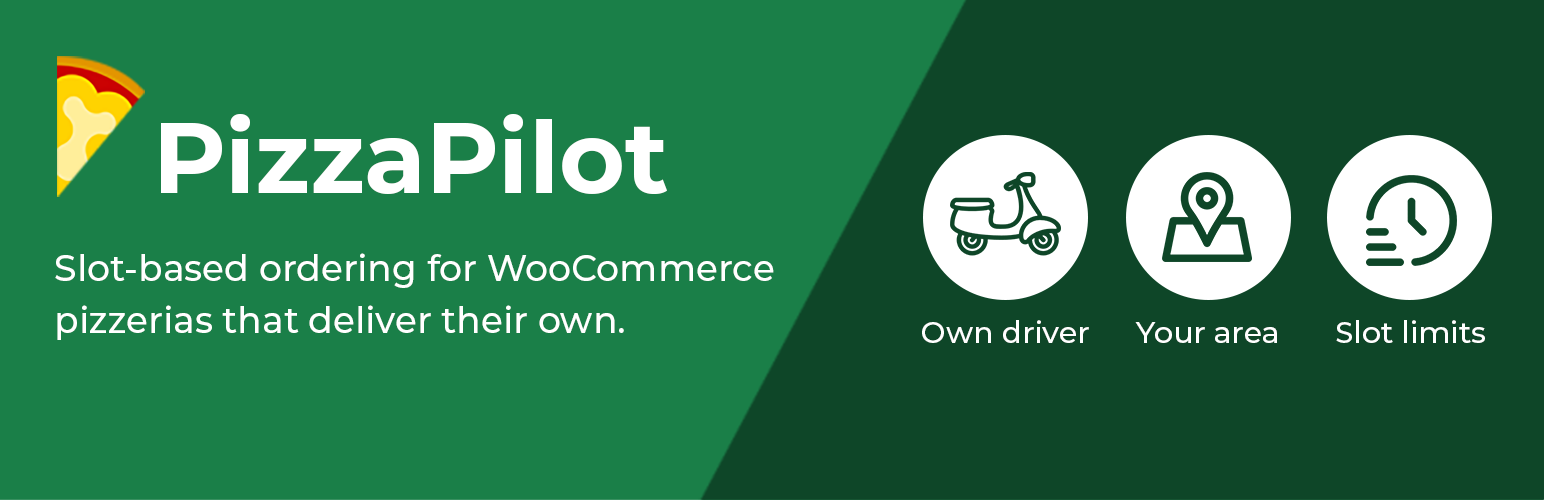
<style>
.page{position:relative;width:1544px;height:500px;background:#1a7f48}
.page>*{position:absolute;margin:0}
.t1{font:100.3px "Montserrat-Bold";color:#ffffff}
.t2{font:36.1px/52.2px "Montserrat-Medium";color:#ffffff}
.t3{font:30.1px "Montserrat-Medium";color:#ffffff}
</style>
<div class="page">
<p class="t1" style="left:161px;top:114px;width:506px;height:80px">PizzaPilot</p>
<p class="t2" style="left:55px;top:253px;width:719px;height:87px">Slot-based ordering for WooCommerce<br>pizzerias that deliver their own.</p>
<p class="t3" style="left:922px;top:320px;width:167px;height:23px">Own driver</p>
<p class="t3" style="left:1135px;top:322px;width:142px;height:21px">Your area</p>
<p class="t3" style="left:1336px;top:320px;width:149px;height:23px">Slot limits</p>
</div>
